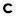
<style>
.page{position:relative;width:16px;height:16px;background:#f3f3f3}
.page>*{position:absolute;margin:0}
.t1{font:18px "CenturyGothic-Bold";color:#000000}
</style>
<div class="page">
<p class="t1" style="left:3px;top:3px;width:10px;height:11px">c</p>
</div>
